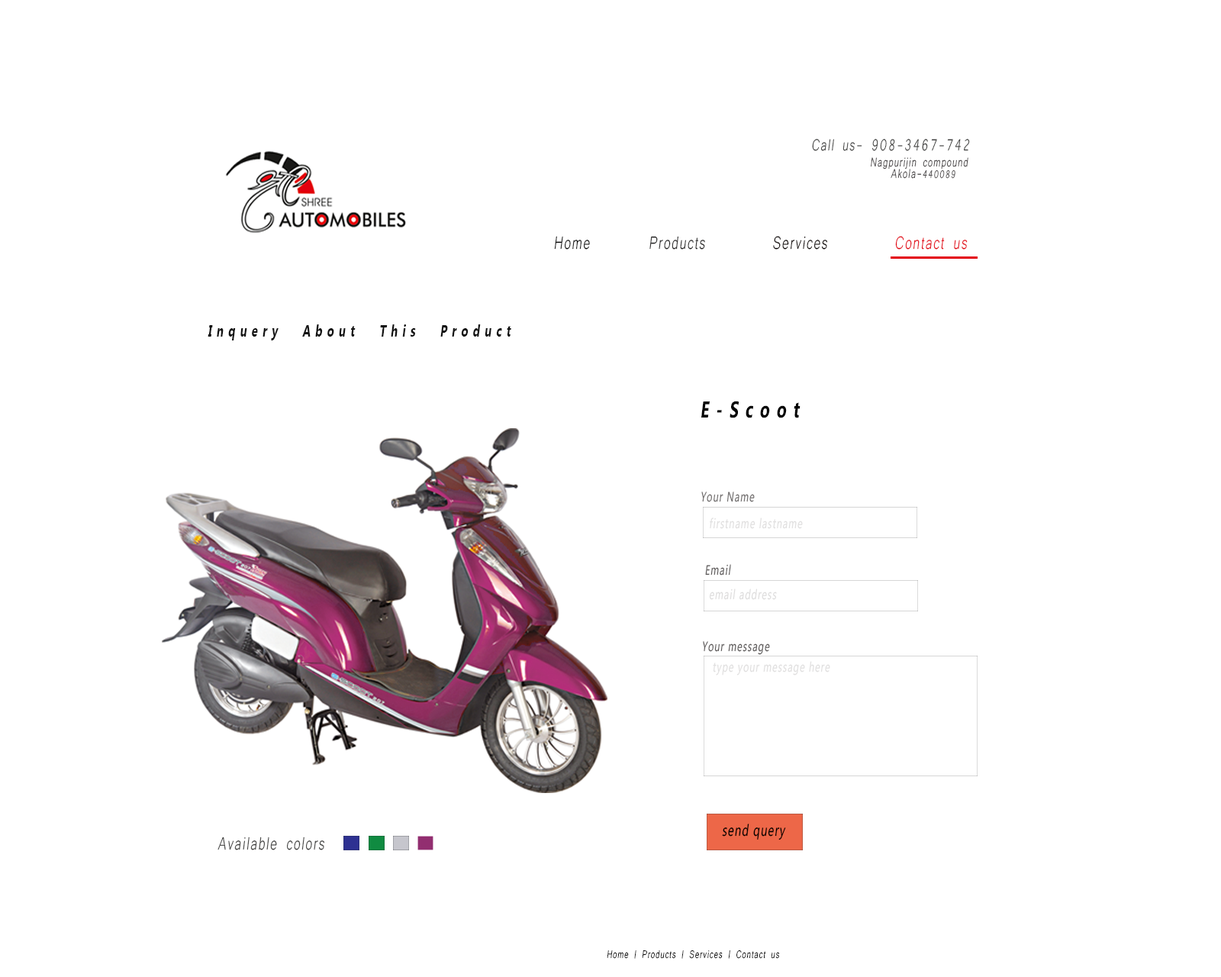
<style>
.page{position:relative;width:1221px;height:977px;background:#ffffff}
.page>*{position:absolute;margin:0}
.t1{font:20.6px "Microsoft-Yi-Baiti";letter-spacing:0.08em;color:#3b3c3a;font-style:italic;scale:0.7 1}
.t2{font:16px "Microsoft-Yi-Baiti";letter-spacing:0.08em;color:#545152;font-style:italic;scale:0.7 1}
.t3{font:13.7px "Microsoft-Yi-Baiti";letter-spacing:0.08em;color:#545152;font-style:italic;scale:0.7 1}
.t4{font:22.9px "Microsoft-Yi-Baiti";letter-spacing:0.08em;font-style:italic;scale:0.7 1}
.t5{font:16px "MicrosoftTaiLe-Bold";letter-spacing:0.08em;color:#121212;font-style:italic;scale:0.7 1}
.t6{font:22.9px "MicrosoftPhagsPa-Bold";letter-spacing:0.08em;color:#000000;font-style:italic;scale:0.7 1}
.t7{font:13.7px "MicrosoftPhagsPa";letter-spacing:0.08em;color:#6d6a6a;font-style:italic;scale:0.7 1}
.t8{font:13.7px "MicrosoftPhagsPa";letter-spacing:0.08em;color:#e0dfdf;font-style:italic;scale:0.7 1}
.t9{font:13.7px "MicrosoftPhagsPa";letter-spacing:0.08em;color:#5c5959;font-style:italic;scale:0.7 1}
.t10{font:13.7px "MicrosoftPhagsPa";letter-spacing:0.08em;color:#dedddd;font-style:italic;scale:0.7 1}
.t11{font:16px "MicrosoftPhagsPa";letter-spacing:0.08em;color:#000000;font-style:italic;scale:0.7 1}
.t12{font:22.9px "Microsoft-Yi-Baiti";letter-spacing:0.08em;color:#3b3c3a;font-style:italic;scale:0.7 1}
.t13{font:13.7px "Microsoft-Yi-Baiti";letter-spacing:0.08em;color:#121212;font-style:italic;scale:0.7 1}
</style>
<div class="page">
<p class="t1" style="left:812px;top:139px;width:158px;height:12px">Call us- 908-3467-742</p>
<p class="t2" style="left:871px;top:157px;width:97px;height:12px">Nagpurijin compound</p>
<p class="t2" style="left:890px;top:169px;width:65px;height:10px">Akola-<span class="t3">440089</span></p>
<p class="t4" style="left:554px;top:236px;width:414px;height:14px">Home       Products        Services        Contact us</p>
<p class="t5" style="left:208px;top:324px;width:303px;height:16px">I n q u e r y      A b o u t      T h i s      P r o d u c t</p>
<p class="t6" style="left:701px;top:401px;width:99px;height:17px">E - S c o o t</p>
<p class="t7" style="left:701px;top:491px;width:54px;height:11px">Your Name</p>
<p class="t8" style="left:710px;top:517px;width:93px;height:12px">firstname lastname</p>
<p class="t9" style="left:705px;top:564px;width:26px;height:11px">Email</p>
<p class="t10" style="left:709px;top:588px;width:68px;height:12px">email address</p>
<p class="t9" style="left:703px;top:641px;width:67px;height:14px">Your message</p>
<p class="t8" style="left:713px;top:661px;width:117px;height:14px">type your message here</p>
<p class="t11" style="left:722px;top:823px;width:64px;height:17px">send query</p>
<p class="t12" style="left:217px;top:836px;width:107px;height:14px">Available colors</p>
<p class="t13" style="left:607px;top:950px;width:172px;height:8px">Home | Products | Services | Contact us</p>
</div>
